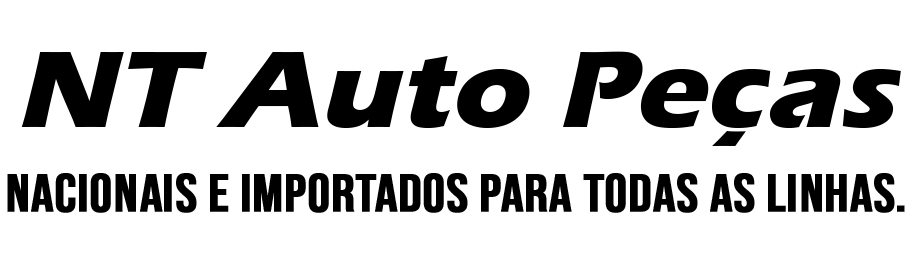
<style>
.page{position:relative;width:907px;height:269px;background:#ffffff}
.page>*{position:absolute;margin:0}
.t1{font:52.5px "BebasNeue-Regular";color:#000000;font-weight:bold;scale:1.07 1}
.t2{font:112.5px "ErasITC-Bold";color:#000000;font-style:italic;scale:1.07 1}
</style>
<div class="page">
<p class="t1" style="left:7px;top:51px;width:898px;height:162px;text-align:center"><span class="t2">NT Auto Peças<br></span>Nacionais e Importados para todas as linhas.</p>
</div>
